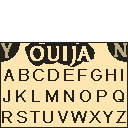
<style>
.page{position:relative;width:128px;height:128px;background:#ffe6b0}
.page>*{position:absolute;margin:0}
.t1{font:20px "Asul-Regular";letter-spacing:0.025em;color:#ffe6b0;font-weight:bold}
.t2{font:16px/21px "ArialMT";letter-spacing:0.145em;color:#24221d;font-weight:bold}
.t3{font:16px/21px "ArialMT";letter-spacing:0.245em;color:#24221d;font-weight:bold}
</style>
<div class="page">
<p class="t1" style="left:30px;top:46px;width:61px;height:20px">OUIJA</p>
<p class="t2" style="left:2px;top:69px;width:124px;height:54px;text-align:center">ABCDEFGHI<br><span class="t3">JKLMNOPQ<br></span>RSTUVWXYZ</p>
</div>
